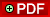
<style>
.page{position:relative;width:50px;height:17px}
.page>*{position:absolute;margin:0}
.t1{font:14px "ArialMT";color:#ffffff;text-transform:uppercase}
</style>
<div class="page">
<p class="t1" style="left:17px;top:3px;width:28px;height:11px">PDF</p>
</div>
